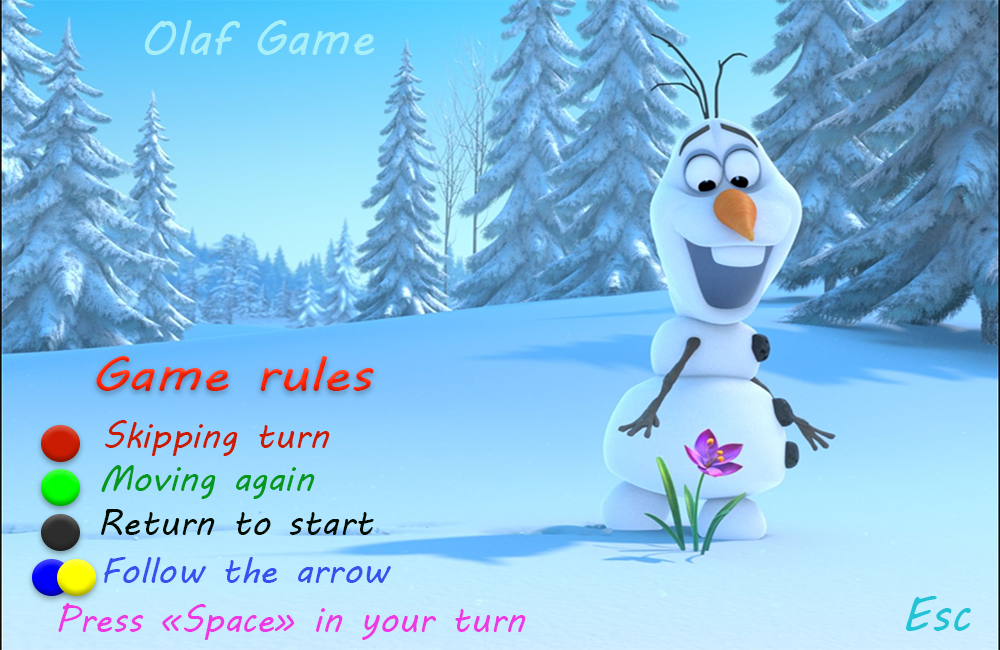
<style>
.page{position:relative;width:1000px;height:650px}
.page>*{position:absolute;margin:0}
.t1{font:48px "MVBoli";color:#a8eff7}
.t2{font:48px "MVBoli";color:#ff2402;scale:1.14 1}
.t3{font:36px "MVBoli";color:#ca1c02}
.t4{font:36px "MVBoli";color:#04981f}
.t5{font:36px "MVBoli";color:#000c02}
.t6{font:36px "MVBoli";color:#3850ec}
.t7{font:36px "MVBoli";color:#ed39e1}
.t8{font:48px "MVBoli";color:#21c3d5}
</style>
<div class="page">
<p class="t1" style="left:144px;top:20px;width:230px;height:35px">Olaf Game</p>
<p class="t2" style="left:96px;top:356px;width:278px;height:35px">Game rules</p>
<p class="t3" style="left:105px;top:420px;width:225px;height:36px">Skipping turn</p>
<p class="t4" style="left:101px;top:465px;width:214px;height:34px">Moving again</p>
<p class="t5" style="left:101px;top:509px;width:273px;height:26px">Return to start</p>
<p class="t6" style="left:104px;top:557px;width:287px;height:26px">Follow the arrow</p>
<p class="t7" style="left:58px;top:603px;width:468px;height:37px">Press «Space» in your turn</p>
<p class="t8" style="left:906px;top:596px;width:65px;height:35px">Esc</p>
</div>
